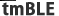
<style>
.page{position:relative;width:59px;height:16px;background:#ffffff}
.page>*{position:absolute;margin:0}
.t1{font:17px "AdobeGothicStd-Bold";color:#303030;font-weight:bold}
</style>
<div class="page">
<p class="t1" style="left:2px;top:2px;width:53px;height:14px">tmBLE</p>
</div>
